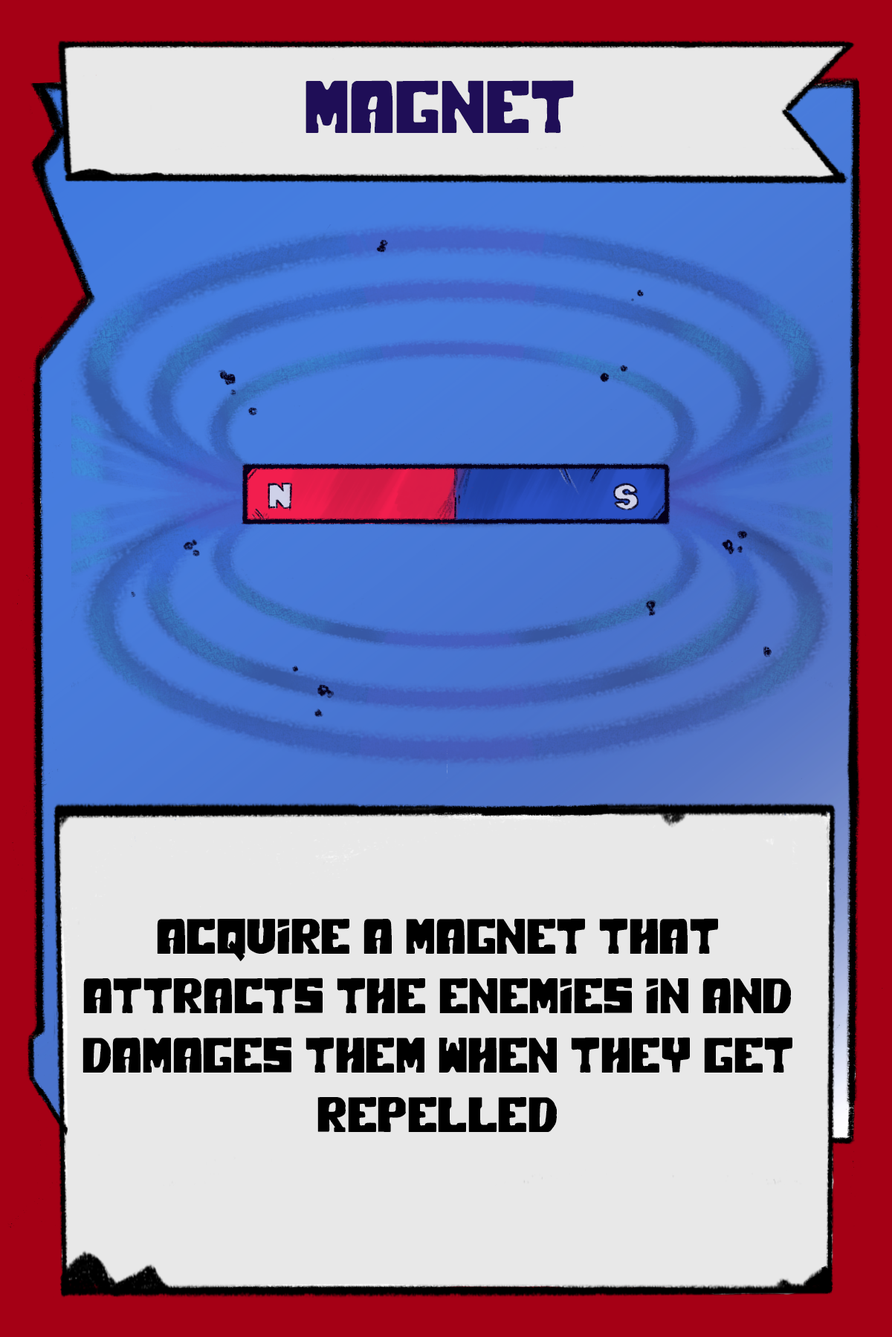
<style>
.page{position:relative;width:892px;height:1337px;background:#e8e8e8}
.page>*{position:absolute;margin:0}
.t1{font:74.3px "PolarPress";color:#1f0e57}
.t2{font:49.5px "PolarPress";color:#000000}
</style>
<div class="page">
<p class="t1" style="left:305px;top:80px;width:269px;height:53px">MAGNET</p>
<p class="t2" style="left:82px;top:918px;width:710px;height:214px;text-align:center">ACQUIRE A MAGNET THAT ATTRACTS THE ENEMIES IN AND DAMAGES THEM WHEN THEY GET REPELLED</p>
</div>
